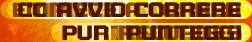
<style>
.page{position:relative;width:252px;height:42px;background:#501401}
.page>*{position:absolute;margin:0}
.t1{font:25px "MTV2C";text-transform:uppercase;scale:1.2 1}
.t2{font:25px "MTV2C";color:#501401;text-transform:uppercase;scale:1.2 1}
</style>
<div class="page">
<p class="t1" style="left:12px;top:2px;width:229px;height:15px">EMPIECE A CORRER</p>
<p class="t1" style="left:18px;top:2px;width:223px;height:15px">COMECE A CORRER</p>
<p class="t2" style="left:56px;top:2px;width:185px;height:15px">AVVIO CORRERE</p>
<p class="t2" style="left:62px;top:25px;width:180px;height:15px">PUNTUACIONES</p>
<p class="t1" style="left:94px;top:25px;width:148px;height:15px">RANGLISTEN</p>
<p class="t1" style="left:119px;top:25px;width:123px;height:15px">RECORDES</p>
<p class="t2" style="left:126px;top:25px;width:115px;height:15px">PUNTEGGI</p>
<p class="t1" style="left:150px;top:25px;width:92px;height:15px">scores</p>
</div>
